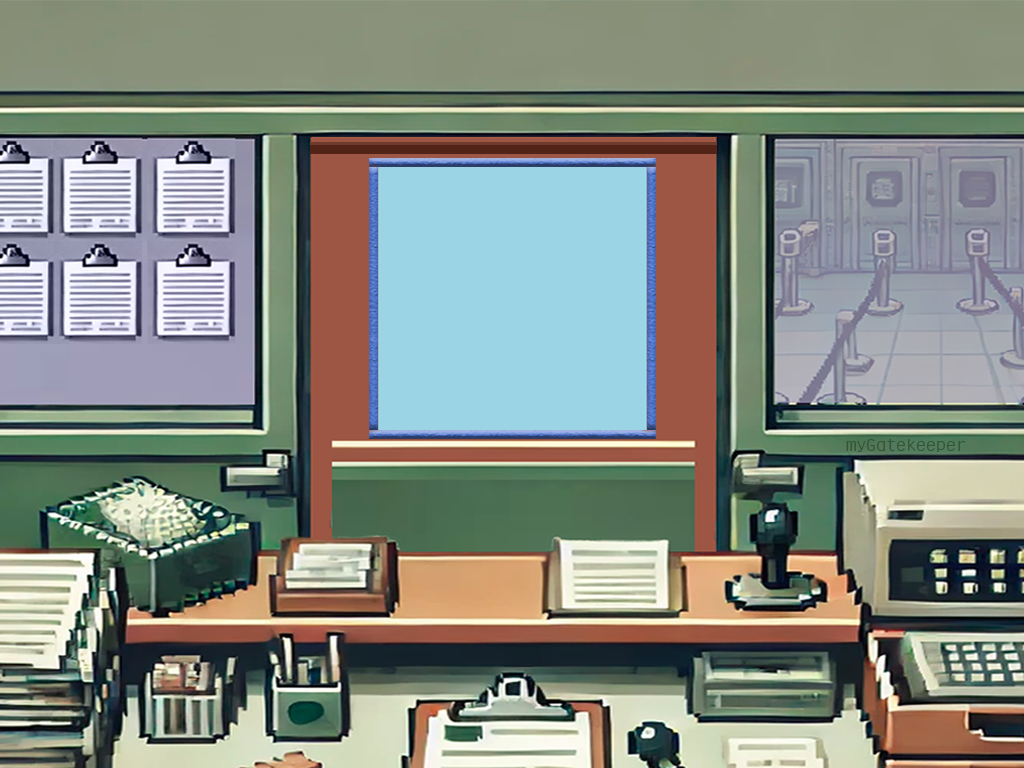
<style>
.page{position:relative;width:1024px;height:768px}
.page>*{position:absolute;margin:0}
.t1{font:14px "OratorRegularSWFTE";color:#305537;scale:1.18 1}
</style>
<div class="page">
<p class="t1" style="left:846px;top:439px;width:120px;height:13px">myGatekeeper</p>
</div>
